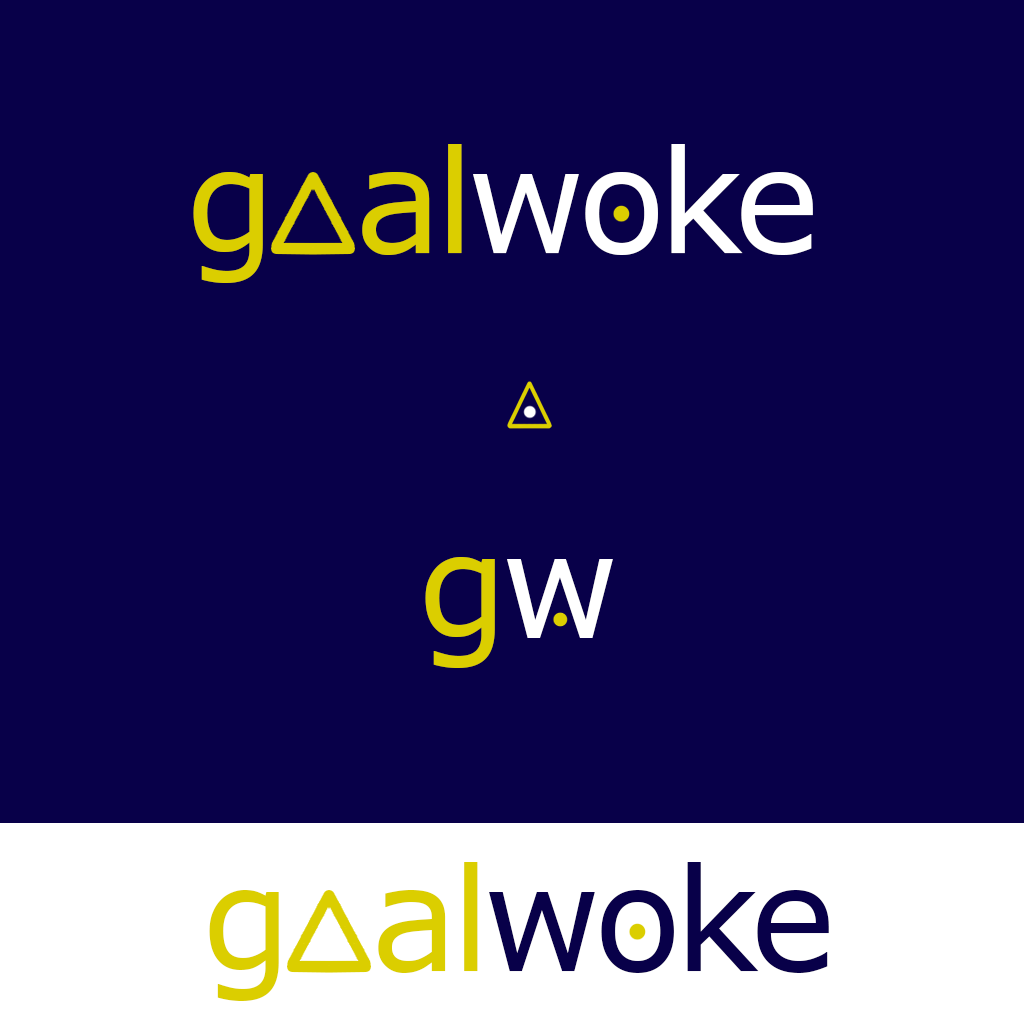
<style>
.page{position:relative;width:1024px;height:1024px;background:#080049}
.page>*{position:absolute;margin:0}
.t1{font:144px "Verdana";letter-spacing:-0.05em;color:#dbce00}
.t2{font:144px "Verdana";letter-spacing:-0.05em;color:#ffffff}
.t3{font:144px "Verdana";letter-spacing:-0.05em;color:#080049}
</style>
<div class="page">
<p class="t1" style="left:193px;top:144px;width:620px;height:139px">g  al<span class="t2">woke</span></p>
<p class="t1" style="left:425px;top:557px;width:188px;height:111px">g<span class="t2">w</span></p>
<p class="t1" style="left:209px;top:862px;width:620px;height:139px">g  al<span class="t3">woke</span></p>
</div>
